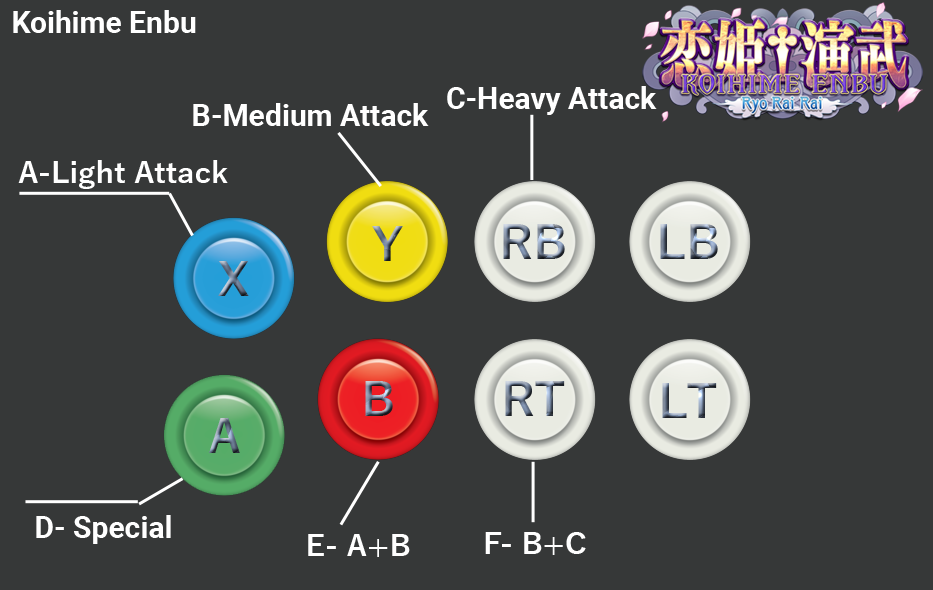
<style>
.page{position:relative;width:933px;height:590px;background:#363838}
.page>*{position:absolute;margin:0}
.t1{font:30px "Roboto-Bold";color:#ffffff}
.t2{font:30px "YuGothic-Bold";color:#ffffff}
</style>
<div class="page">
<p class="t1" style="left:13px;top:10px;width:183px;height:23px">Koihime Enbu</p>
<p class="t1" style="left:447px;top:86px;width:210px;height:29px">C-Heavy Attack</p>
<p class="t1" style="left:193px;top:103px;width:236px;height:23px">B-Medium Attack</p>
<p class="t2" style="left:18px;top:160px;width:210px;height:29px">A-Light Attack</p>
<p class="t1" style="left:36px;top:515px;width:135px;height:29px">D- Special</p>
<p class="t2" style="left:308px;top:534px;width:102px;height:23px">E- A+B</p>
<p class="t2" style="left:485px;top:532px;width:101px;height:23px">F- B+C</p>
</div>
